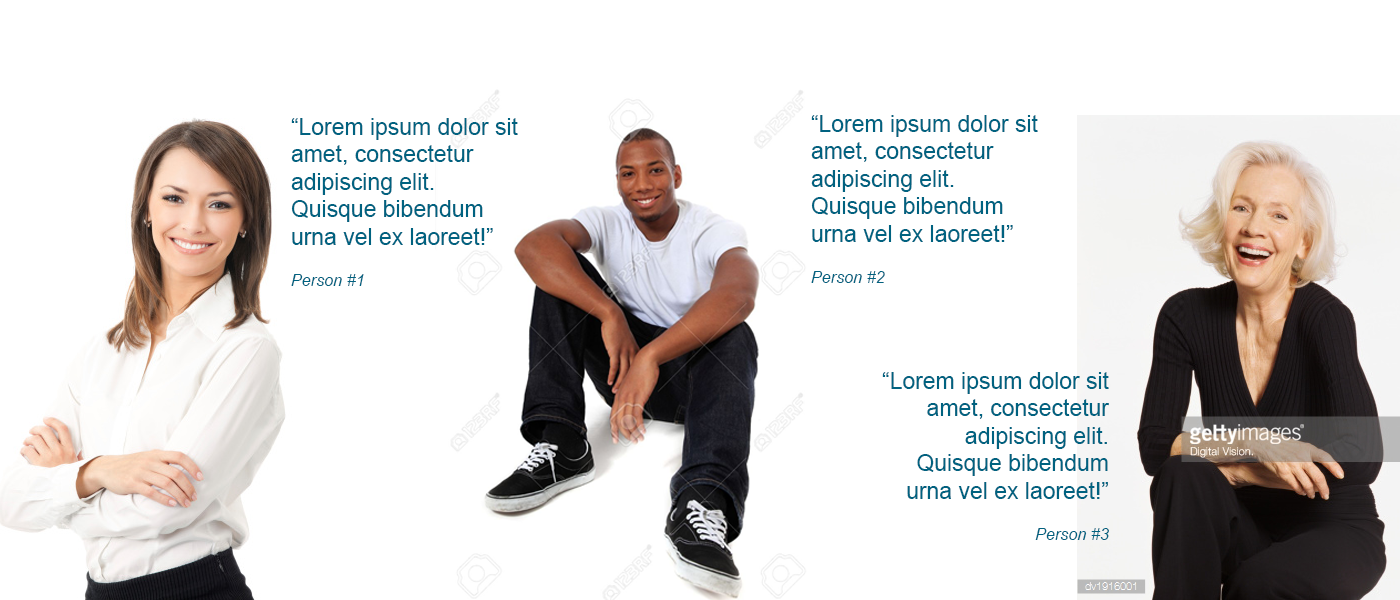
<style>
.page{position:relative;width:1400px;height:600px;background:#ffffff}
.page>*{position:absolute;margin:0}
.t1{font:22.9px "ArialMT";color:#006280}
.t2{font:16.2px "Arial-ItalicMT";color:#006280}
</style>
<div class="page">
<p class="t1" style="left:291px;top:118px;width:227px;height:168px">“Lorem ipsum dolor sit amet, consectetur adipiscing elit. Quisque bibendum urna vel ex laoreet!”<br><span class="t2">Person #1</span></p>
<p class="t1" style="left:811px;top:115px;width:227px;height:168px">“Lorem ipsum dolor sit amet, consectetur adipiscing elit. Quisque bibendum urna vel ex laoreet!”<br><span class="t2">Person #2</span></p>
<p class="t1" style="left:882px;top:372px;width:227px;height:168px;text-align:right">“Lorem ipsum dolor sit amet, consectetur adipiscing elit. Quisque bibendum urna vel ex laoreet!”<br><span class="t2">Person #3</span></p>
</div>
